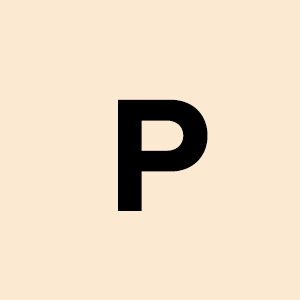
<style>
.page{position:relative;width:300px;height:300px;background:#fbe9d1}
.page>*{position:absolute;margin:0}
.t1{font:166.7px "ProximaNova-Bold";color:#000000}
</style>
<div class="page">
<p class="t1" style="left:118px;top:99px;width:90px;height:112px">P</p>
</div>
